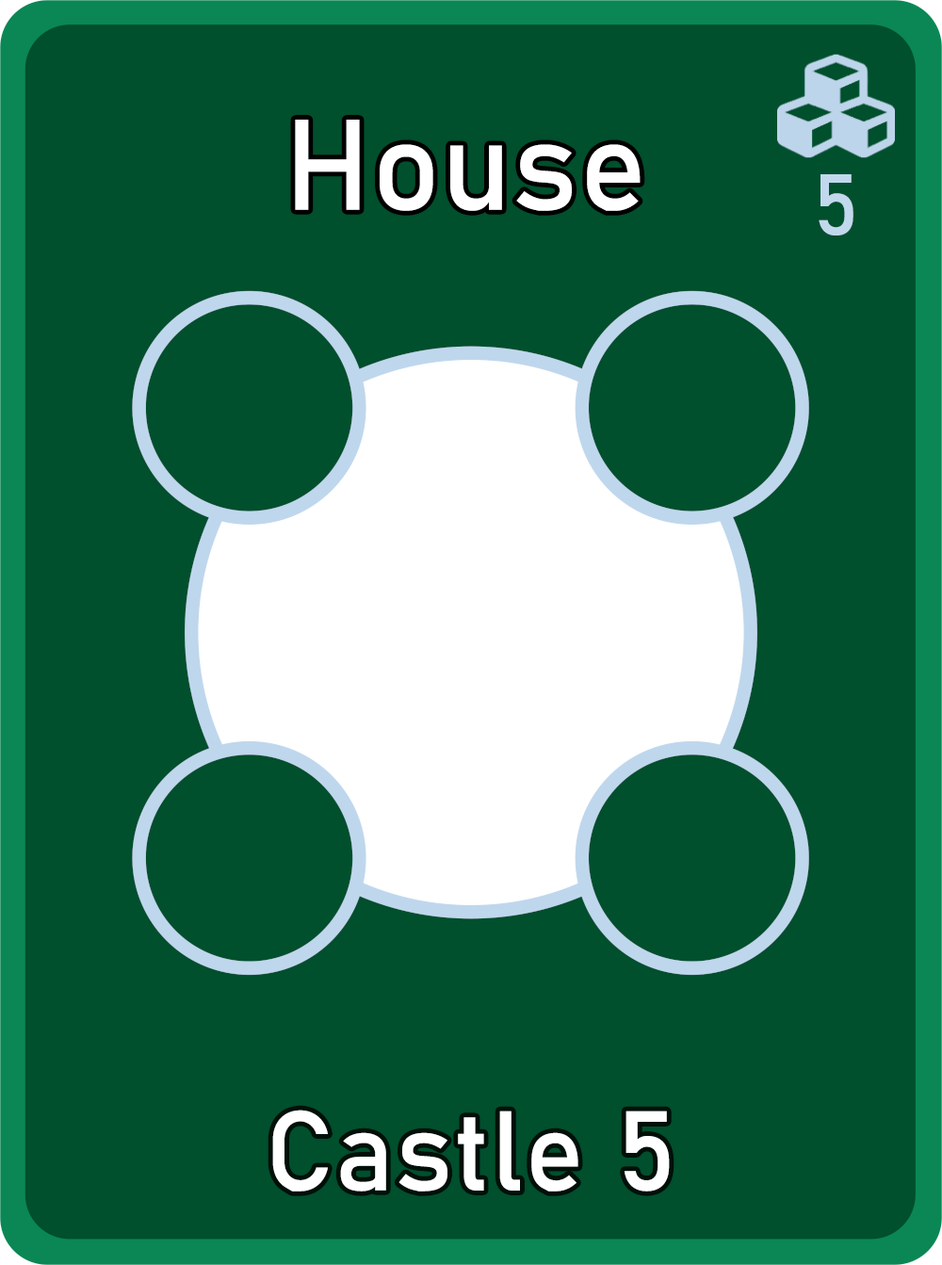
<style>
.page{position:relative;width:942px;height:1265px;background:#004f2d}
.page>*{position:absolute;margin:0}
.t1{font:126.7px "Bahnschrift";letter-spacing:0.01em;color:#ffffff}
.t2{font:85px "Bahnschrift";letter-spacing:0.01em;color:#c1d8ed}
.t3{font:111.3px "Bahnschrift";letter-spacing:0.01em;color:#ffffff}
</style>
<div class="page">
<p class="t1" style="left:295px;top:120px;width:346px;height:91px">House</p>
<p class="t2" style="left:819px;top:174px;width:35px;height:62px">5</p>
<p class="t3" style="left:272px;top:1110px;width:398px;height:82px">Castle 5</p>
</div>
